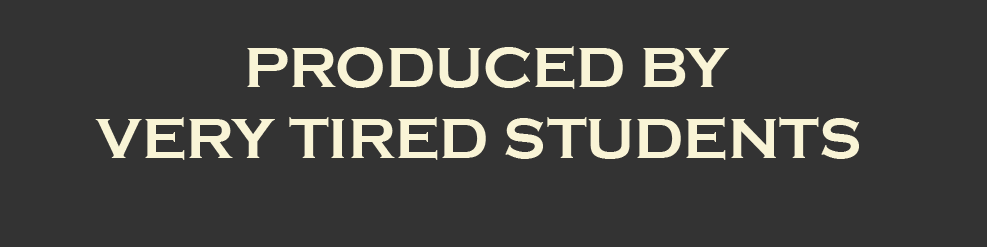
<style>
.page{position:relative;width:987px;height:247px;background:#333333}
.page>*{position:absolute;margin:0}
.t1{font:58.6px "CopperplateGothic-Bold";color:#f9f4d6;text-transform:uppercase}
</style>
<div class="page">
<p class="t1" style="left:95px;top:46px;width:765px;height:114px;text-align:center">Produced By<br>Very Tired Students</p>
</div>
